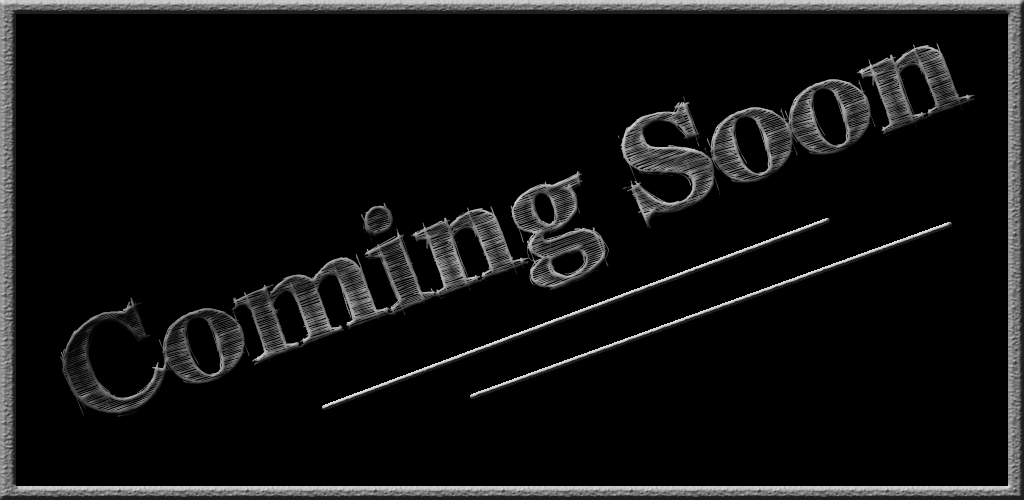
<style>
.page{position:relative;width:1024px;height:500px;background:#000000}
.page>*{position:absolute;margin:0}
.t1{font:140px "FFFTusj-Bold";letter-spacing:0.03em}
</style>
<div class="page">
<p class="t1" style="left:60px;top:43px;width:915px;height:374px;rotate:-20deg">Coming Soon</p>
</div>
